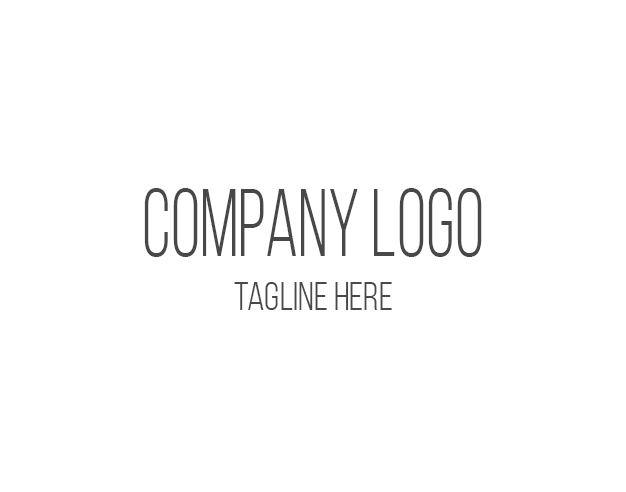
<style>
.page{position:relative;width:626px;height:492px;background:#ffffff}
.page>*{position:absolute;margin:0}
.t1{font:95px "BebasNeueBook";color:#484848;scale:0.8 1}
.t2{font:40px "BebasNeueBook";color:#484848}
</style>
<div class="page">
<p class="t1" style="left:144px;top:188px;width:338px;height:69px">Company logo</p>
<p class="t2" style="left:234px;top:282px;width:158px;height:28px">tagline here</p>
</div>
